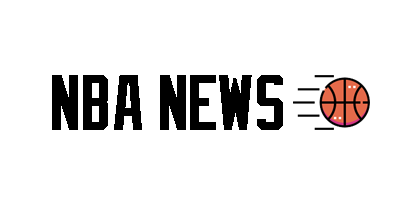
<style>
.page{position:relative;width:400px;height:200px;background:#ffffff}
.page>*{position:absolute;margin:0}
.t1{font:66.7px "NBACeltics";color:#000000;font-weight:bold}
</style>
<div class="page">
<p class="t1" style="left:52px;top:75px;width:231px;height:55px">NBA News</p>
</div>
